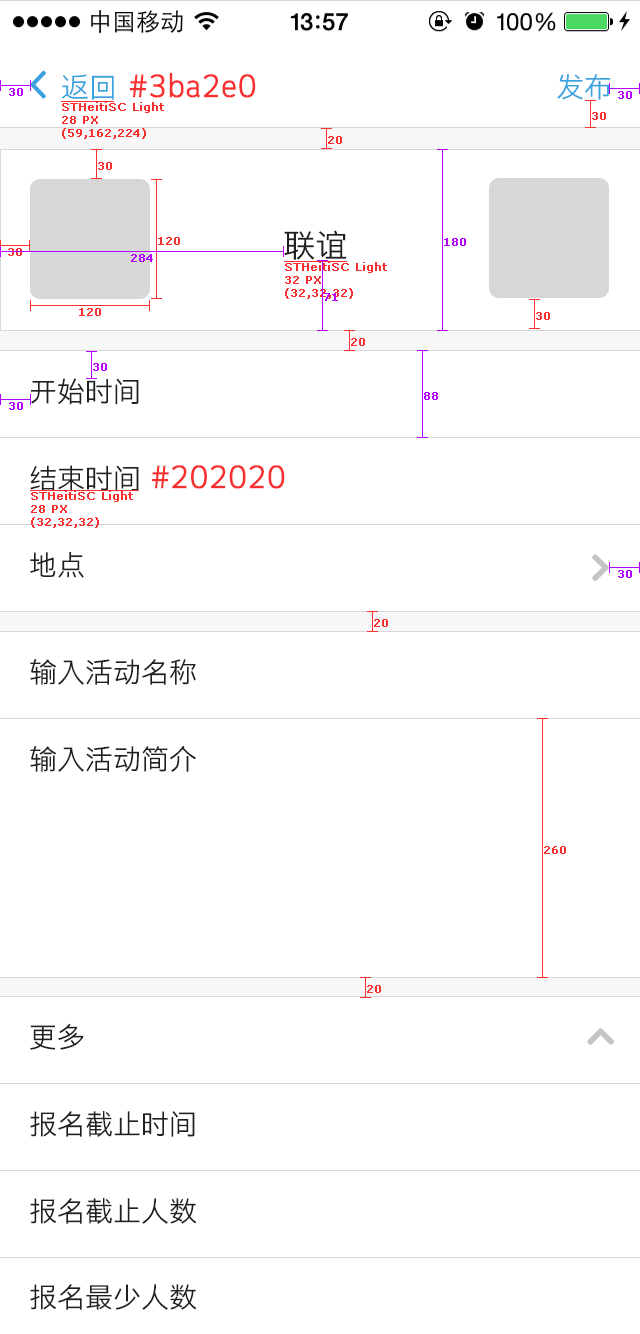
<style>
.page{position:relative;width:640px;height:1334px;background:#ffffff}
.page>*{position:absolute;margin:0}
.t1{font:28px "STHeitiSC-Light";color:#3ba2e0}
.t2{font:30px "STHeitiSC-Light";color:#f83030;font-weight:bold}
.t3{font:11px "Verdana";color:#b400ff;font-weight:bold}
.t4{font:11px "Verdana";color:#f83030;font-weight:bold}
.t5{font:32px "STHeitiSC-Light";color:#202020}
.t6{font:28px "STHeitiSC-Light";color:#202020}
</style>
<div class="page">
<p class="t1" style="left:61px;top:74px;width:53px;height:26px">返回</p>
<p class="t2" style="left:129px;top:73px;width:127px;height:25px">#3ba2e0</p>
<p class="t1" style="left:557px;top:74px;width:54px;height:26px">发布</p>
<p class="t3" style="left:9px;top:88px;width:14px;height:8px">30</p>
<p class="t4" style="left:62px;top:102px;width:102px;height:37px">STHeitiSC Light<br>28 PX<br>(59,162,224)</p>
<p class="t3" style="left:618px;top:91px;width:14px;height:8px">30</p>
<p class="t4" style="left:592px;top:112px;width:14px;height:8px">30</p>
<p class="t4" style="left:328px;top:136px;width:14px;height:8px">20</p>
<p class="t4" style="left:98px;top:162px;width:14px;height:8px">30</p>
<p class="t5" style="left:284px;top:230px;width:63px;height:30px">联谊</p>
<p class="t4" style="left:158px;top:237px;width:22px;height:8px">120</p>
<p class="t3" style="left:444px;top:238px;width:22px;height:8px">180</p>
<p class="t4" style="left:8px;top:248px;width:14px;height:8px">30</p>
<p class="t3" style="left:131px;top:254px;width:22px;height:8px">284</p>
<p class="t4" style="left:285px;top:262px;width:102px;height:37px">STHeitiSC Light<br>32 PX<br>(32,32,32)</p>
<p class="t3" style="left:324px;top:293px;width:14px;height:8px">71</p>
<p class="t4" style="left:79px;top:308px;width:22px;height:8px">120</p>
<p class="t4" style="left:536px;top:312px;width:14px;height:8px">30</p>
<p class="t4" style="left:351px;top:338px;width:14px;height:8px">20</p>
<p class="t3" style="left:93px;top:363px;width:14px;height:8px">30</p>
<p class="t6" style="left:31px;top:378px;width:108px;height:27px">开始时间</p>
<p class="t3" style="left:424px;top:392px;width:14px;height:8px">88</p>
<p class="t3" style="left:9px;top:402px;width:14px;height:8px">30</p>
<p class="t6" style="left:30px;top:465px;width:109px;height:27px">结束时间</p>
<p class="t2" style="left:151px;top:465px;width:134px;height:24px">#202020</p>
<p class="t4" style="left:31px;top:491px;width:102px;height:37px">STHeitiSC Light<br>28 PX<br>(32,32,32)</p>
<p class="t6" style="left:30px;top:552px;width:54px;height:26px">地点</p>
<p class="t3" style="left:618px;top:570px;width:14px;height:8px">30</p>
<p class="t4" style="left:374px;top:619px;width:14px;height:8px">20</p>
<p class="t6" style="left:30px;top:659px;width:166px;height:26px">输入活动名称</p>
<p class="t6" style="left:30px;top:745px;width:166px;height:27px">输入活动简介</p>
<p class="t4" style="left:544px;top:846px;width:22px;height:8px">260</p>
<p class="t4" style="left:367px;top:985px;width:14px;height:8px">20</p>
<p class="t6" style="left:30px;top:1023px;width:54px;height:27px">更多</p>
<p class="t6" style="left:30px;top:1111px;width:165px;height:26px">报名截止时间</p>
<p class="t6" style="left:30px;top:1198px;width:167px;height:26px">报名截止人数</p>
<p class="t6" style="left:30px;top:1284px;width:167px;height:26px">报名最少人数</p>
</div>
